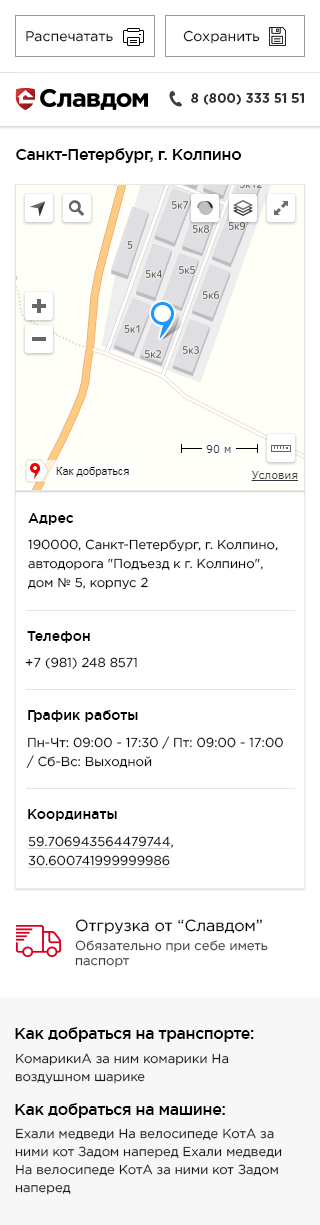
<style>
.page{position:relative;width:320px;height:1225px;background:#ffffff}
.page>*{position:absolute;margin:0}
.t1{font:14px "GothamPro";color:#000000}
.t2{font:13px "GothamPro-Bold";color:#2b3032}
.t3{font:16px "GothamPro-Medium";letter-spacing:-0.025em;color:#000000}
.t4{font:14px "GothamPro-Medium";color:#000000}
.t5{font:13px/19px "GothamPro";color:#000000}
.t6{font:13px "GothamPro";color:#000000}
.t7{font:13px/19px "GothamPro";color:#000000;text-decoration:underline}
.t8{font:13px/19px "GothamPro";color:#3b3b3b}
.t9{font:16px/19px "GothamPro";color:#000000}
.t10{font:13px/15px "GothamPro";color:#3b3b3b}
.t11{font:13px/18px "GothamPro";color:#191a1a}
</style>
<div class="page">
<p class="t1" style="left:183px;top:30px;width:77px;height:14px">Сохранить</p>
<p class="t1" style="left:26px;top:31px;width:87px;height:11px">Распечатать</p>
<p class="t2" style="left:191px;top:93px;width:113px;height:12px">8 (800) 333 51 51</p>
<p class="t3" style="left:16px;top:148px;width:226px;height:15px">Санкт-Петербург, г. Колпино</p>
<p class="t4" style="left:28px;top:513px;width:46px;height:12px">Адрес</p>
<p class="t5" style="left:28px;top:539px;width:250px;height:51px">190000, Санкт-Петербург, г. Колпино, <br>автодорога "Подъезд к г. Колпино", <br>дом № 5, корпус 2</p>
<p class="t4" style="left:27px;top:631px;width:63px;height:12px">Телефон</p>
<p class="t6" style="left:25px;top:657px;width:112px;height:12px">+7 (981) 248 8571</p>
<p class="t4" style="left:28px;top:710px;width:110px;height:12px">График работы</p>
<p class="t5" style="left:26px;top:736px;width:257px;height:32px">Пн-Чт: 09:00 - 17:30 / Пт: 09:00 - 17:00 <br>/ Сб-Вс: Выходной</p>
<p class="t4" style="left:28px;top:809px;width:89px;height:12px">Координаты</p>
<p class="t7" style="left:28px;top:836px;width:145px;height:32px">59.706943564479744<span class="t5">, <br></span>30.600741999999986</p>
<p class="t8" style="left:75px;top:919px;width:193px;height:49px"><span class="t9">Отгрузка от “Славдом”<br></span>Обязательно при себе иметь <br><span class="t10">паспорт</span></p>
<p class="t3" style="left:15px;top:1027px;width:239px;height:15px">Как добраться на транспорте:</p>
<p class="t11" style="left:15px;top:1053px;width:214px;height:31px">КомарикиА за ним комарики На <br>воздушном шарике</p>
<p class="t3" style="left:15px;top:1103px;width:210px;height:15px">Как добраться на машине:</p>
<p class="t11" style="left:15px;top:1128px;width:267px;height:67px">Ехали медведи На велосипеде КотА за <br>ними кот Задом наперед Ехали медведи <br>На велосипеде КотА за ними кот Задом <br>наперед</p>
</div>
